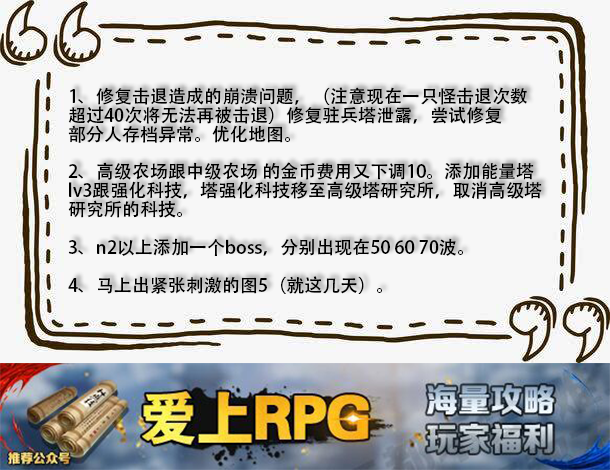
<style>
.page{position:relative;width:610px;height:470px;background:#f7f7f7}
.page>*{position:absolute;margin:0}
.t1{font:18px "AdobeHeitiStd-Regular";color:#000000}
</style>
<div class="page">
<p class="t1" style="left:68px;top:87px;width:474px;height:207px">1、修复击退造成的崩溃问题，（注意现在一只怪击退次数<br>超过40次将无法再被击退）修复驻兵塔泄露，尝试修复<br>部分人存档异常。优化地图。<br><br>2、高级农场跟中级农场 的金币费用又下调10。添加能量塔<br>lv3跟强化科技，塔强化科技移至高级塔研究所，取消高级塔<br>研究所的科技。<br><br>3、n2以上添加一个boss，分别出现在50 60 70波。<br><br>4、马上出紧张刺激的图5（就这几天）。</p>
</div>
